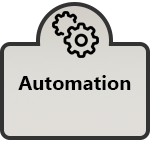
<style>
.page{position:relative;width:150px;height:150px;background:#ffffff}
.page>*{position:absolute;margin:0}
.t1{font:20px "Gadugi-Bold";color:#000000}
</style>
<div class="page">
<p class="t1" style="left:18px;top:75px;width:113px;height:15px">Automation</p>
</div>
